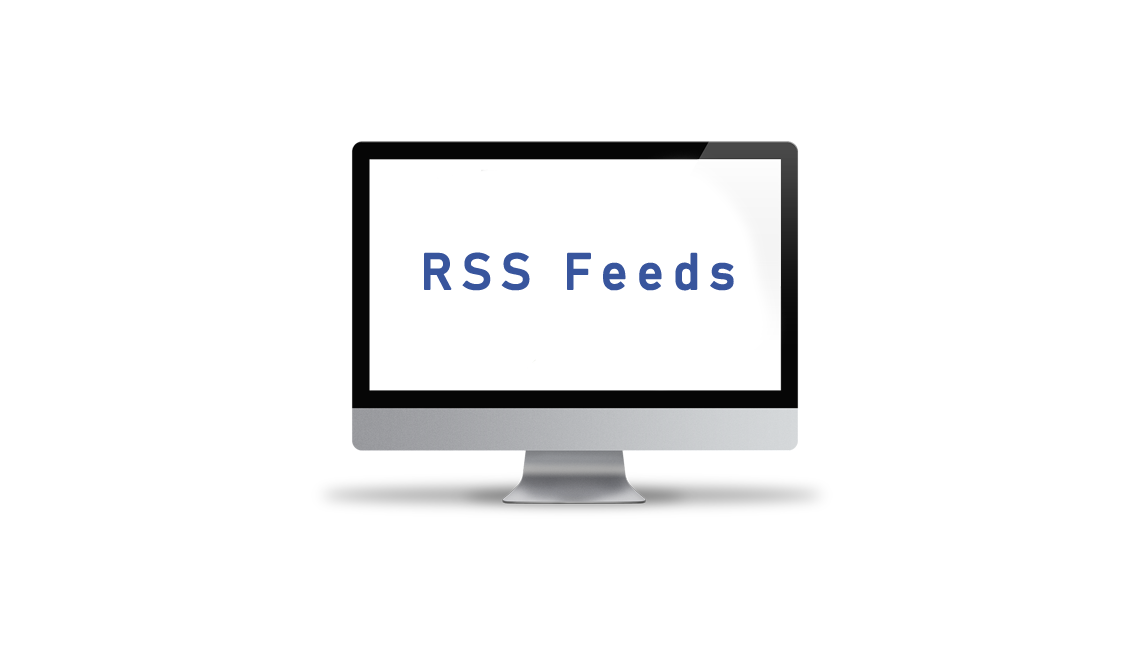
<style>
.page{position:relative;width:1145px;height:650px;background:#ffffff}
.page>*{position:absolute;margin:0}
.t1{font:50px "Bahnschrift";letter-spacing:0.16em;color:#38559d;font-weight:bold}
</style>
<div class="page">
<p class="t1" style="left:424px;top:252px;width:310px;height:39px">RSS Feeds</p>
</div>
